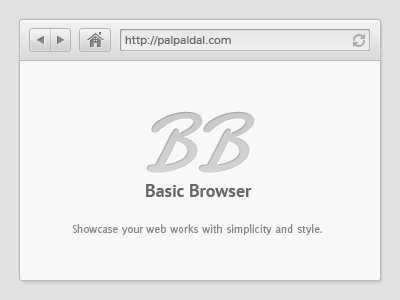
<style>
.page{position:relative;width:400px;height:300px;background:#f8f8f8}
.page>*{position:absolute;margin:0}
.t1{font:12px "Nunito-Light";letter-spacing:0.01em;color:#666666}
.t2{font:84px "Damion";color:#cccccc}
.t3{font:18px "PTSans-Bold";color:#666666}
.t4{font:12px "Delicious-Roman";color:#888888}
</style>
<div class="page">
<p class="t1" style="left:125px;top:36px;width:106px;height:10px">http://palpaldal.com</p>
<p class="t2" style="left:146px;top:111px;width:109px;height:62px">BB</p>
<p class="t3" style="left:146px;top:184px;width:106px;height:13px">Basic Browser</p>
<p class="t4" style="left:72px;top:224px;width:250px;height:11px">Showcase your web works with simplicity and style.</p>
</div>
